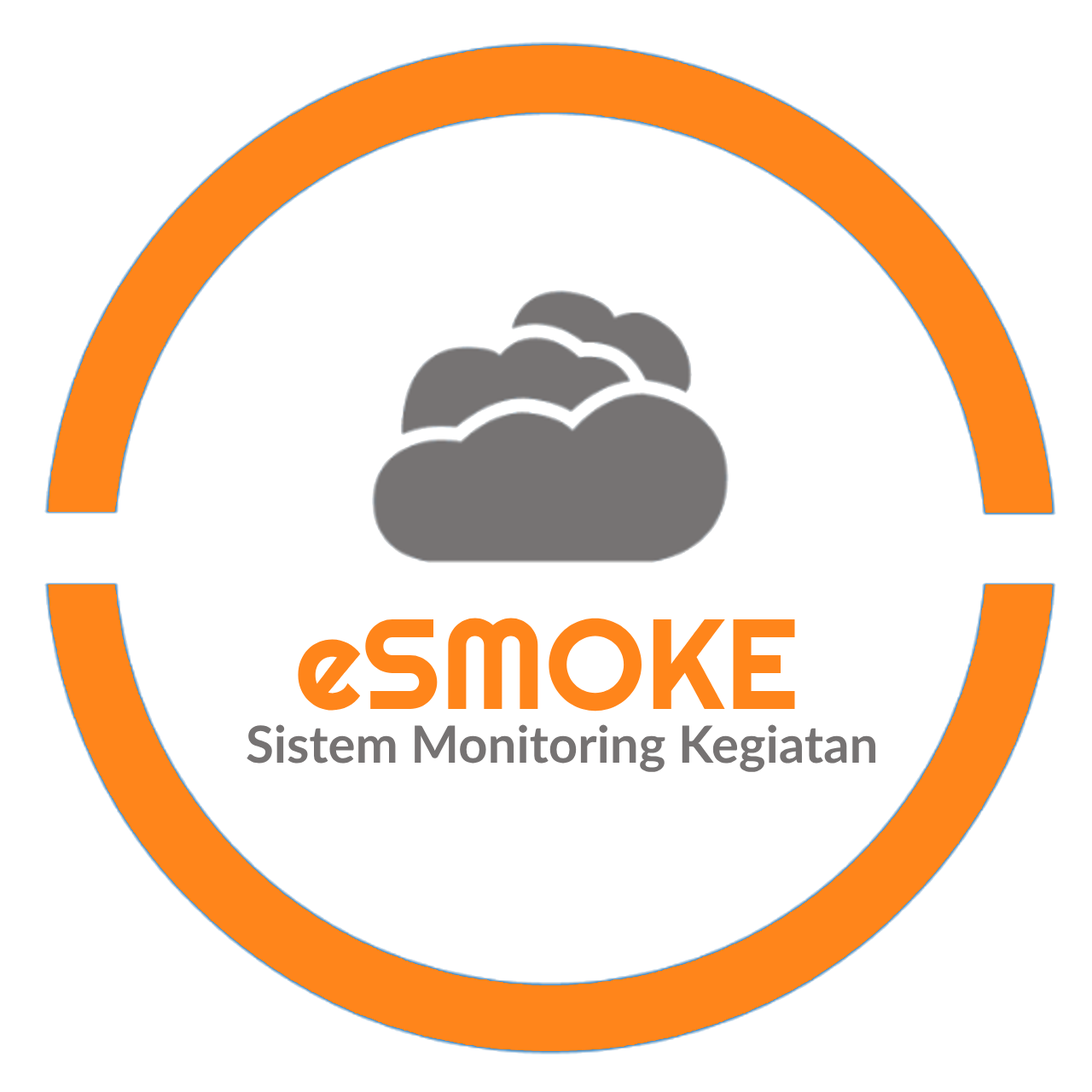
<style>
.page{position:relative;width:1092px;height:1092px;background:#ffffff}
.page>*{position:absolute;margin:0}
.t1{font:51.2px "Lato-Bold";color:#767373}
</style>
<div class="page">
<p class="t1" style="left:247px;top:724px;width:629px;height:48px">Sistem Monitoring Kegiatan</p>
</div>
